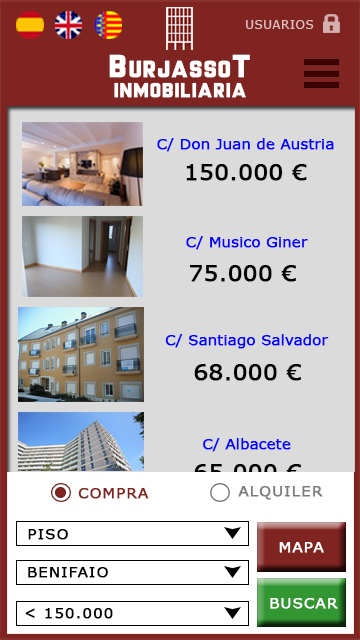
<style>
.page{position:relative;width:360px;height:640px;background:#dbdbdb}
.page>*{position:absolute;margin:0}
.t1{font:11.6px "MSReferenceSansSerif";letter-spacing:0.07em;color:#e0c0c0}
.t2{font:21.7px "MrHeadlines";letter-spacing:0.07em;color:#ffffff;scale:1.11 1}
.t3{font:29.6px "MrHeadlines";letter-spacing:0.07em;color:#ffffff;scale:1.11 1}
.t4{font:18.8px "MrHeadlines";letter-spacing:0.07em;color:#ffffff;scale:1.11 1}
.t5{font:14px "MSReferenceSansSerif";color:#0600ff;font-weight:bold;scale:1.04 1}
.t6{font:22px "MSReferenceSansSerif";color:#000000;font-weight:bold;scale:1.04 1}
.t7{font:22px "MSReferenceSansSerif";font-weight:bold;scale:1.04 1}
.t8{font:14px "MSReferenceSansSerif";letter-spacing:0.07em;color:#7d7d7d;font-weight:bold;scale:1.04 1}
.t9{font:14px "MSReferenceSansSerif";letter-spacing:0.07em;color:#7f2421;font-weight:bold;scale:1.04 1}
.t10{font:14px "MSReferenceSansSerif";letter-spacing:0.07em;color:#000000;font-weight:bold;scale:1.04 1}
.t11{font:14px "MSReferenceSansSerif";letter-spacing:0.07em;color:#ffffff;font-weight:bold;scale:1.04 1}
</style>
<div class="page">
<p class="t1" style="left:246px;top:20px;width:68px;height:9px">USUARIOS</p>
<p class="t2" style="left:109px;top:54px;width:141px;height:24px"><span class="t3">B</span>URJASSO<span class="t3">T</span></p>
<p class="t4" style="left:114px;top:82px;width:132px;height:16px">INMOBILIARIA</p>
<p class="t5" style="left:157px;top:138px;width:177px;height:14px">C/ Don Juan de Austria</p>
<p class="t6" style="left:186px;top:164px;width:121px;height:17px">150.000 €</p>
<p class="t5" style="left:186px;top:236px;width:122px;height:14px">C/ Musico Giner</p>
<p class="t6" style="left:189px;top:265px;width:107px;height:17px">75.000 €</p>
<p class="t5" style="left:165px;top:334px;width:164px;height:15px">C/ Santiago Salvador</p>
<p class="t6" style="left:194px;top:364px;width:107px;height:17px">68.000 €</p>
<p class="t5" style="left:203px;top:438px;width:88px;height:14px">C/ Albacete</p>
<p class="t7" style="left:194px;top:464px;width:107px;height:17px">65.000 €</p>
<p class="t8" style="left:238px;top:486px;width:85px;height:14px">ALQUILER</p>
<p class="t9" style="left:78px;top:488px;width:71px;height:11px">COMPRA</p>
<p class="t10" style="left:28px;top:529px;width:40px;height:11px">PISO</p>
<p class="t11" style="left:279px;top:542px;width:45px;height:11px">MAPA</p>
<p class="t10" style="left:28px;top:567px;width:80px;height:11px">BENIFAIO</p>
<p class="t11" style="left:270px;top:598px;width:68px;height:11px">BUSCAR</p>
<p class="t10" style="left:25px;top:608px;width:88px;height:11px">&lt; 150.000</p>
</div>
